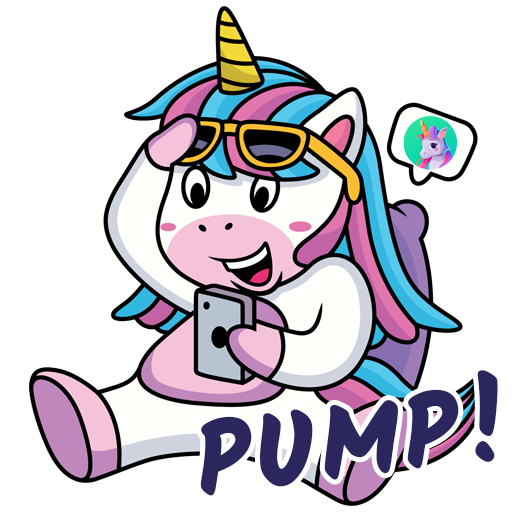
<style>
.page{position:relative;width:512px;height:512px;background:#ffffff}
.page>*{position:absolute;margin:0}
.t1{font:108.3px "Kalam-Bold";letter-spacing:0.025em;color:#2c265e;font-weight:bold}
</style>
<div class="page">
<p class="t1" style="left:200px;top:370px;width:298px;height:126px;rotate:-7deg">PUMP!</p>
</div>
